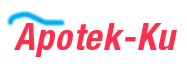
<style>
.page{position:relative;width:187px;height:68px;background:#ffffff}
.page>*{position:absolute;margin:0}
.t1{font:37px "HelveticaNeueLTStd-BdCnO";letter-spacing:0.02em;color:#ff2e4c}
</style>
<div class="page">
<p class="t1" style="left:14px;top:23px;width:163px;height:34px">Apotek-Ku</p>
</div>
